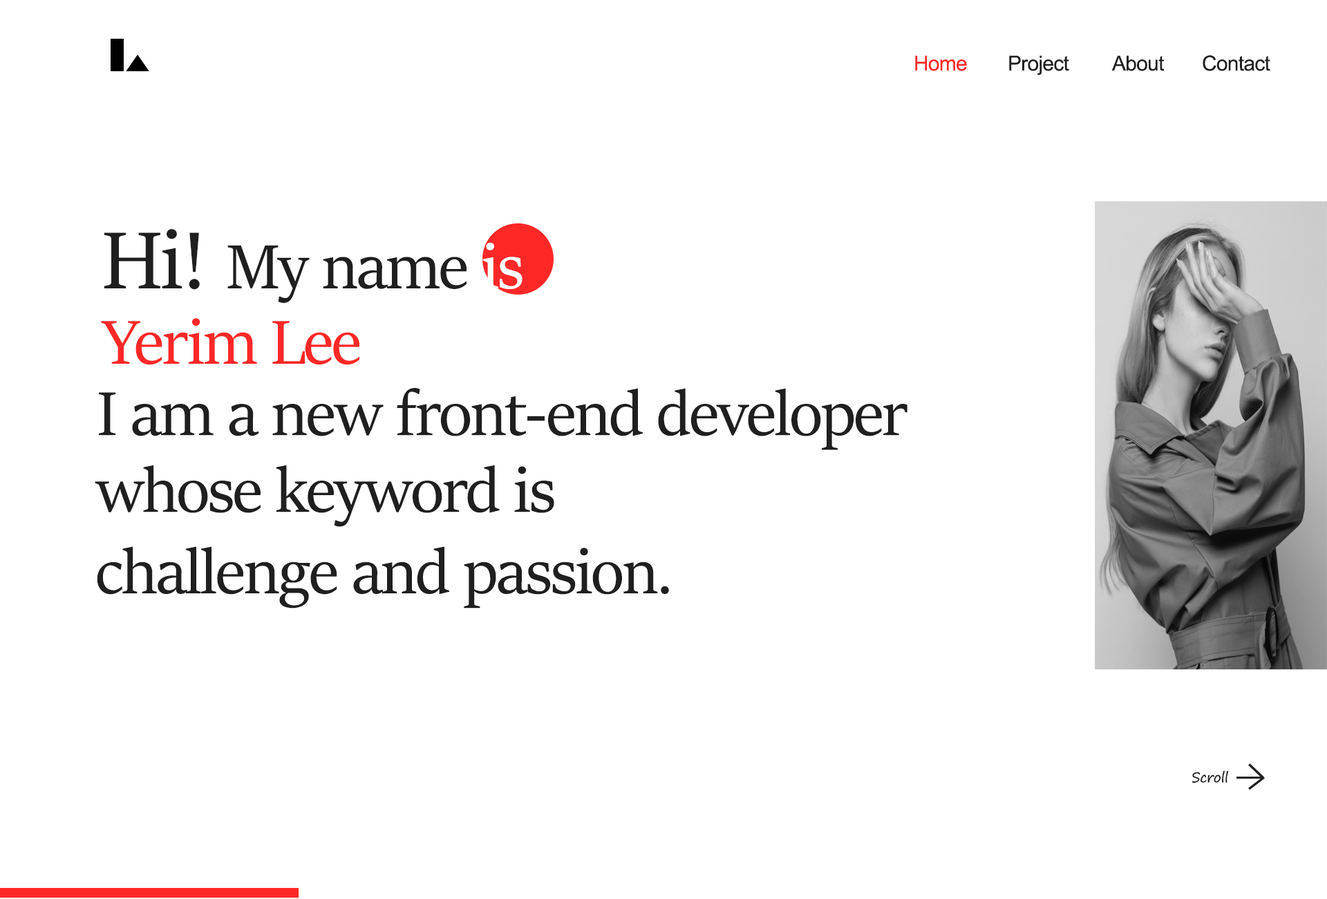
<style>
.page{position:relative;width:1327px;height:899px;background:#ffffff}
.page>*{position:absolute;margin:0}
.t1{font:20.7px "ArialMT";letter-spacing:-0.025em;color:#fe2827}
.t2{font:20.7px "ArialMT";letter-spacing:-0.025em;color:#1f1f1f}
.t3{font:89.9px "SitkaDisplay";letter-spacing:-0.025em;color:#1f1f1f}
.t4{font:69.1px "SitkaDisplay";letter-spacing:-0.025em;color:#1f1f1f}
.t5{font:69.1px "SitkaDisplay";letter-spacing:-0.025em;color:#ffffff}
.t6{font:69.1px "SitkaDisplay";letter-spacing:-0.025em;color:#fe2827}
.t7{font:13.8px "SegoePrint";letter-spacing:-0.025em;color:#1f1f1f}
</style>
<div class="page">
<p class="t1" style="left:915px;top:55px;width:52px;height:16px">Home</p>
<p class="t2" style="left:1009px;top:55px;width:60px;height:20px">Project</p>
<p class="t2" style="left:1111px;top:55px;width:54px;height:16px">About</p>
<p class="t2" style="left:1203px;top:55px;width:67px;height:16px">Contact</p>
<p class="t3" style="left:104px;top:229px;width:96px;height:61px">Hi!</p>
<p class="t4" style="left:227px;top:242px;width:296px;height:61px">My name <span class="t5">is</span></p>
<p class="t6" style="left:101px;top:318px;width:258px;height:47px">Yerim Lee</p>
<p class="t4" style="left:99px;top:388px;width:809px;height:62px">I am a new front-end developer</p>
<p class="t4" style="left:95px;top:464px;width:459px;height:63px">whose keyword is</p>
<p class="t4" style="left:97px;top:546px;width:572px;height:62px">challenge and passion.</p>
<p class="t7" style="left:1192px;top:770px;width:37px;height:12px">Scroll</p>
</div>
